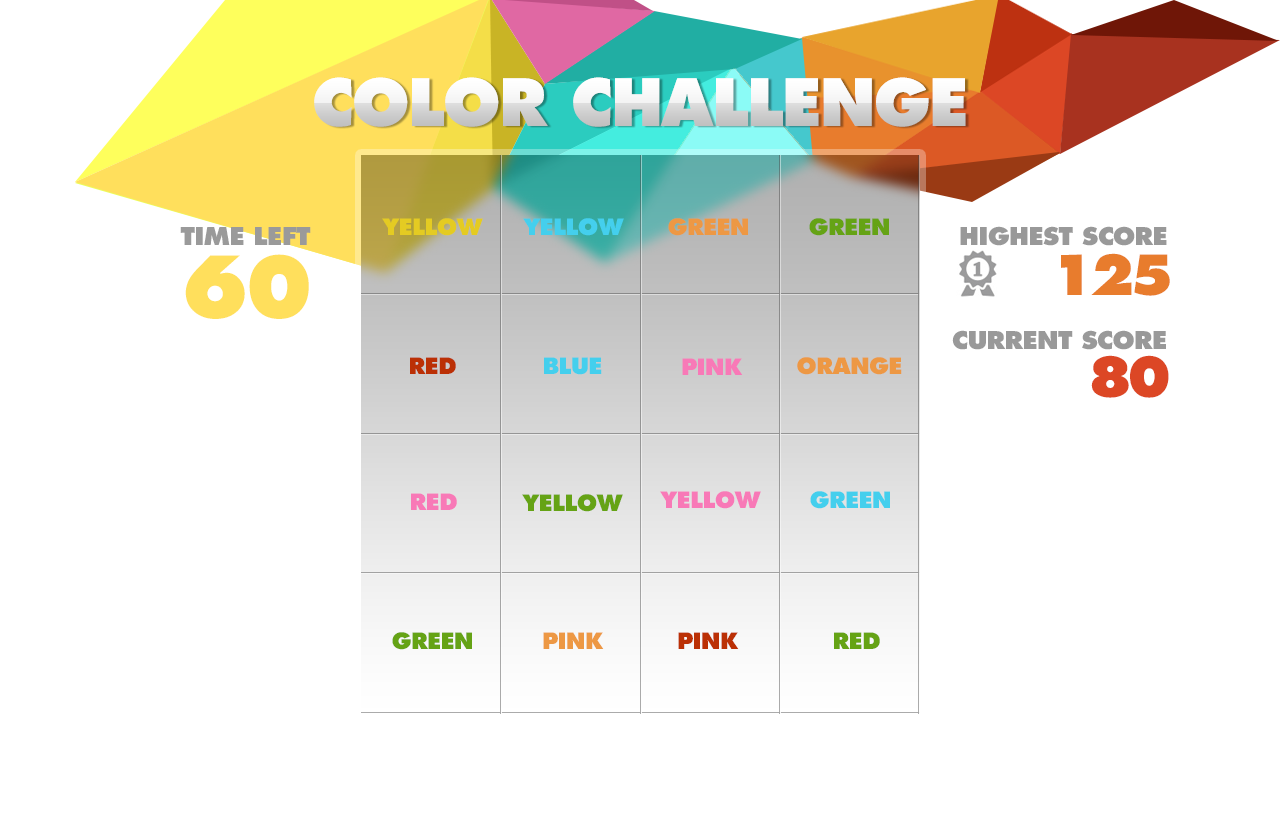
<style>
.page{position:relative;width:1280px;height:838px;background:#ffffff}
.page>*{position:absolute;margin:0}
.t1{font:63.3px "FuturaExtraBold";letter-spacing:-0.025em}
.t2{font:22px "FuturaExtraBold";letter-spacing:-0.025em;color:#e4cb22}
.t3{font:22px "FuturaExtraBold";letter-spacing:-0.025em;color:#44cfed}
.t4{font:22px "FuturaExtraBold";letter-spacing:-0.025em;color:#ed9844}
.t5{font:22px "FuturaExtraBold";letter-spacing:-0.025em;color:#65a315}
.t6{font:23.7px "FuturaExtraBold";letter-spacing:-0.025em;color:#999999}
.t7{font:82.7px "FuturaExtraBold";letter-spacing:-0.05em;color:#ffdf5c}
.t8{font:53.7px "FuturaExtraBold";letter-spacing:-0.1em;color:#e87c2d}
.t9{font:22px "FuturaExtraBold";letter-spacing:-0.025em;color:#ba3006}
.t10{font:22px "FuturaExtraBold";letter-spacing:-0.025em;color:#f879b7}
.t11{font:53.7px "FuturaExtraBold";letter-spacing:-0.1em;color:#dc4725}
.t12{font:22px "FuturaExtraBold";letter-spacing:-0.025em;color:#bb3005}
</style>
<div class="page">
<p class="t1" style="left:314px;top:77px;width:652px;height:50px">COLOR CHALLENGE</p>
<p class="t2" style="left:382px;top:218px;width:101px;height:18px">YELLOW</p>
<p class="t3" style="left:523px;top:218px;width:101px;height:18px">YELLOW</p>
<p class="t4" style="left:668px;top:218px;width:80px;height:18px">GREEN</p>
<p class="t5" style="left:809px;top:218px;width:80px;height:18px">GREEN</p>
<p class="t6" style="left:180px;top:227px;width:131px;height:18px">TIME LEFT</p>
<p class="t6" style="left:960px;top:226px;width:207px;height:20px">HIGHEST SCORE</p>
<p class="t7" style="left:185px;top:254px;width:124px;height:65px">60</p>
<p class="t8" style="left:1061px;top:253px;width:109px;height:43px">125</p>
<p class="t6" style="left:952px;top:330px;width:214px;height:20px">CURRENT SCORE</p>
<p class="t9" style="left:410px;top:357px;width:46px;height:17px">RED</p>
<p class="t3" style="left:544px;top:357px;width:58px;height:18px">BLUE</p>
<p class="t10" style="left:682px;top:358px;width:61px;height:17px">PINK</p>
<p class="t4" style="left:797px;top:357px;width:105px;height:18px">ORANGE</p>
<p class="t11" style="left:1091px;top:355px;width:78px;height:43px">80</p>
<p class="t10" style="left:411px;top:493px;width:46px;height:17px">RED</p>
<p class="t5" style="left:522px;top:494px;width:101px;height:18px">YELLOW</p>
<p class="t10" style="left:660px;top:491px;width:101px;height:18px">YELLOW</p>
<p class="t3" style="left:810px;top:491px;width:80px;height:18px">GREEN</p>
<p class="t5" style="left:392px;top:632px;width:80px;height:18px">GREEN</p>
<p class="t4" style="left:543px;top:632px;width:61px;height:17px">PINK</p>
<p class="t12" style="left:678px;top:632px;width:61px;height:17px">PINK</p>
<p class="t5" style="left:834px;top:632px;width:46px;height:17px">RED</p>
</div>
